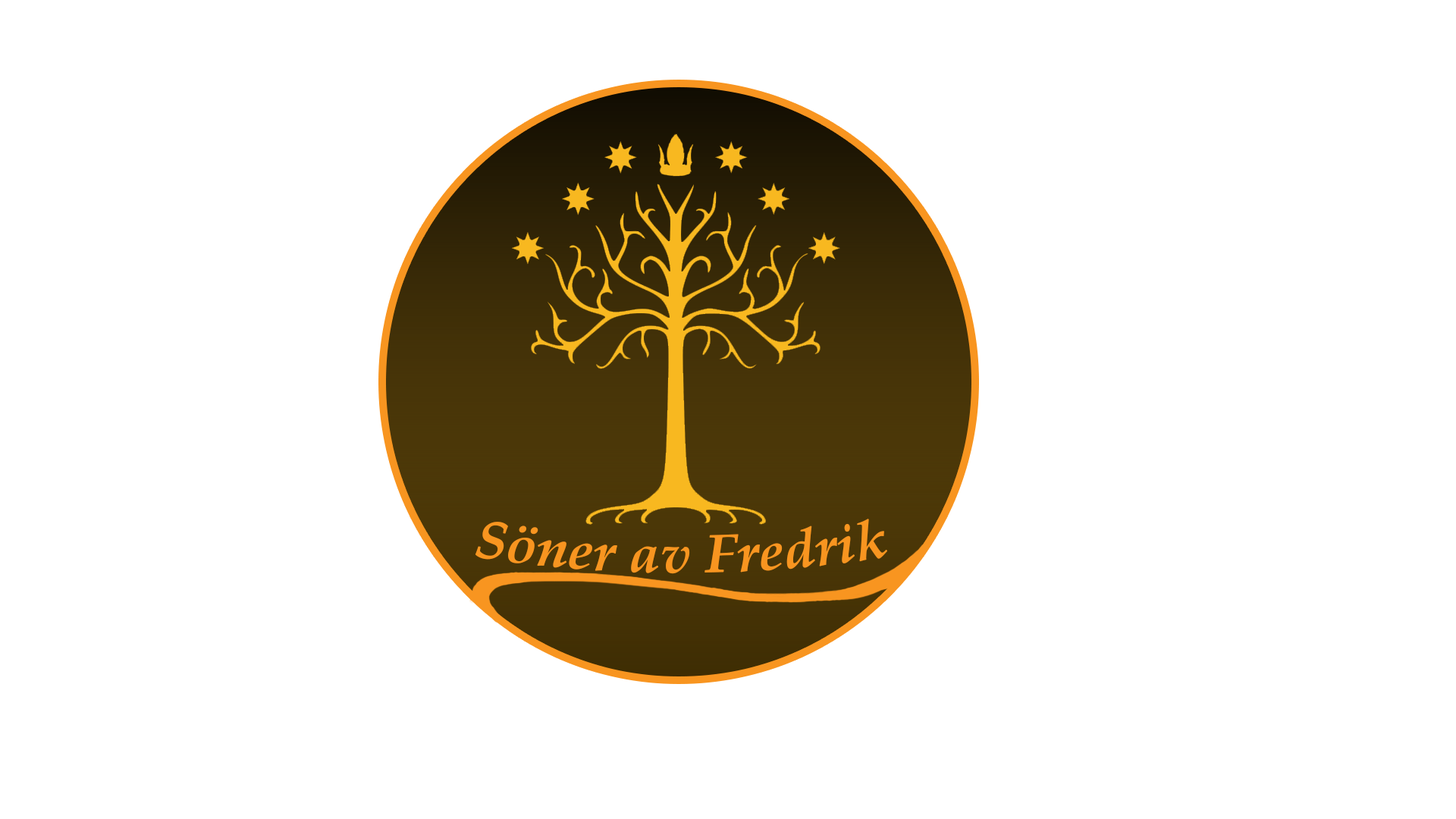
<style>
.page{position:relative;width:1456px;height:819px;background:#ffffff}
.page>*{position:absolute;margin:0}
.t1{font:54.6px "PalatinoLinotype-BoldItalic";color:#f89520}
</style>
<div class="page">
<p class="t1" style="left:475px;top:519px;width:412px;height:55px">Söner av Fredrik</p>
</div>
